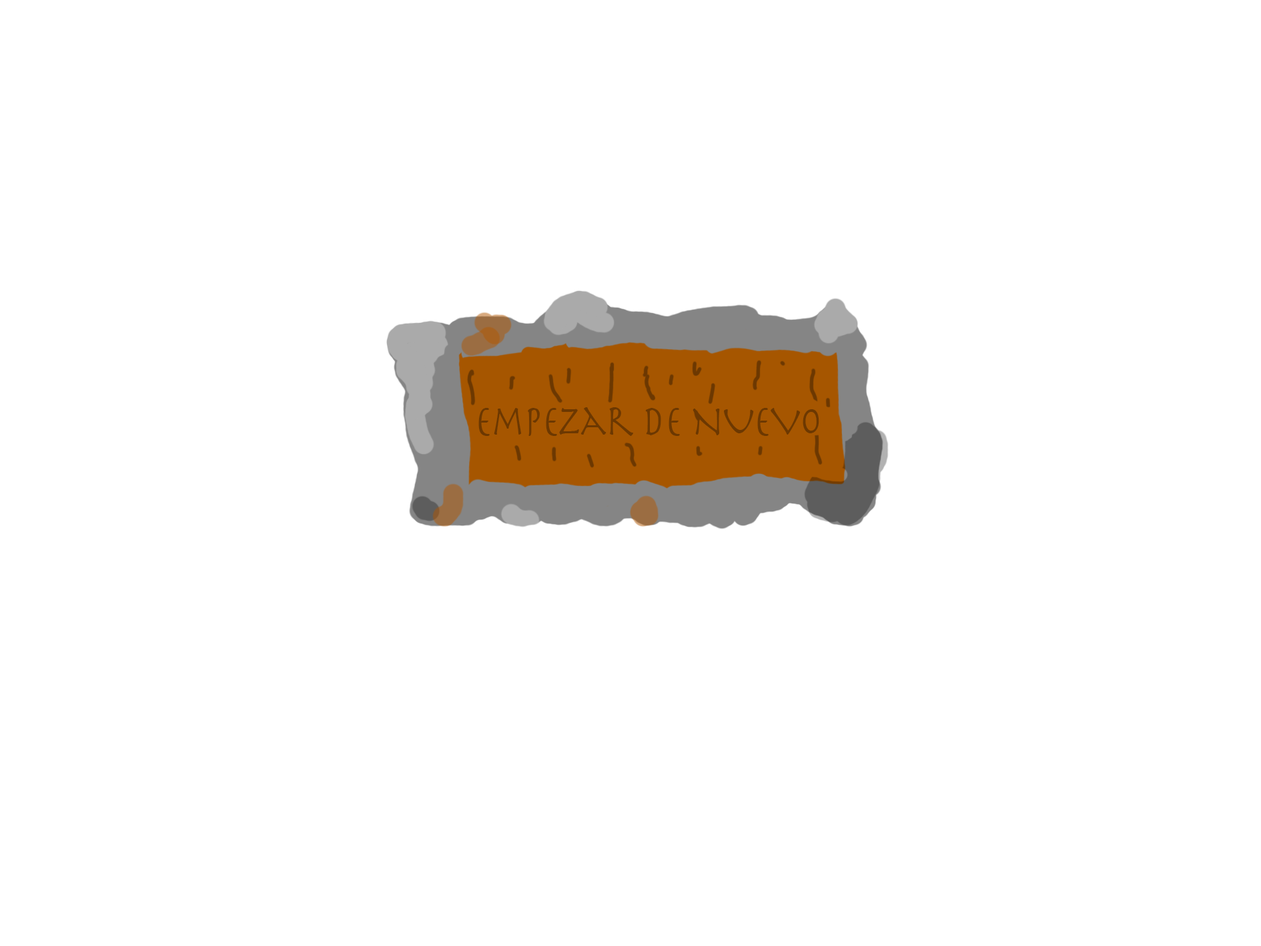
<style>
.page{position:relative;width:1261px;height:946px;background:#ffffff}
.page>*{position:absolute;margin:0}
.t1{font:44.5px "Herculanum";color:#6c3801;scale:0.77 1}
</style>
<div class="page">
<p class="t1" style="left:478px;top:407px;width:341px;height:29px">Empezar DE NUEVO</p>
</div>
